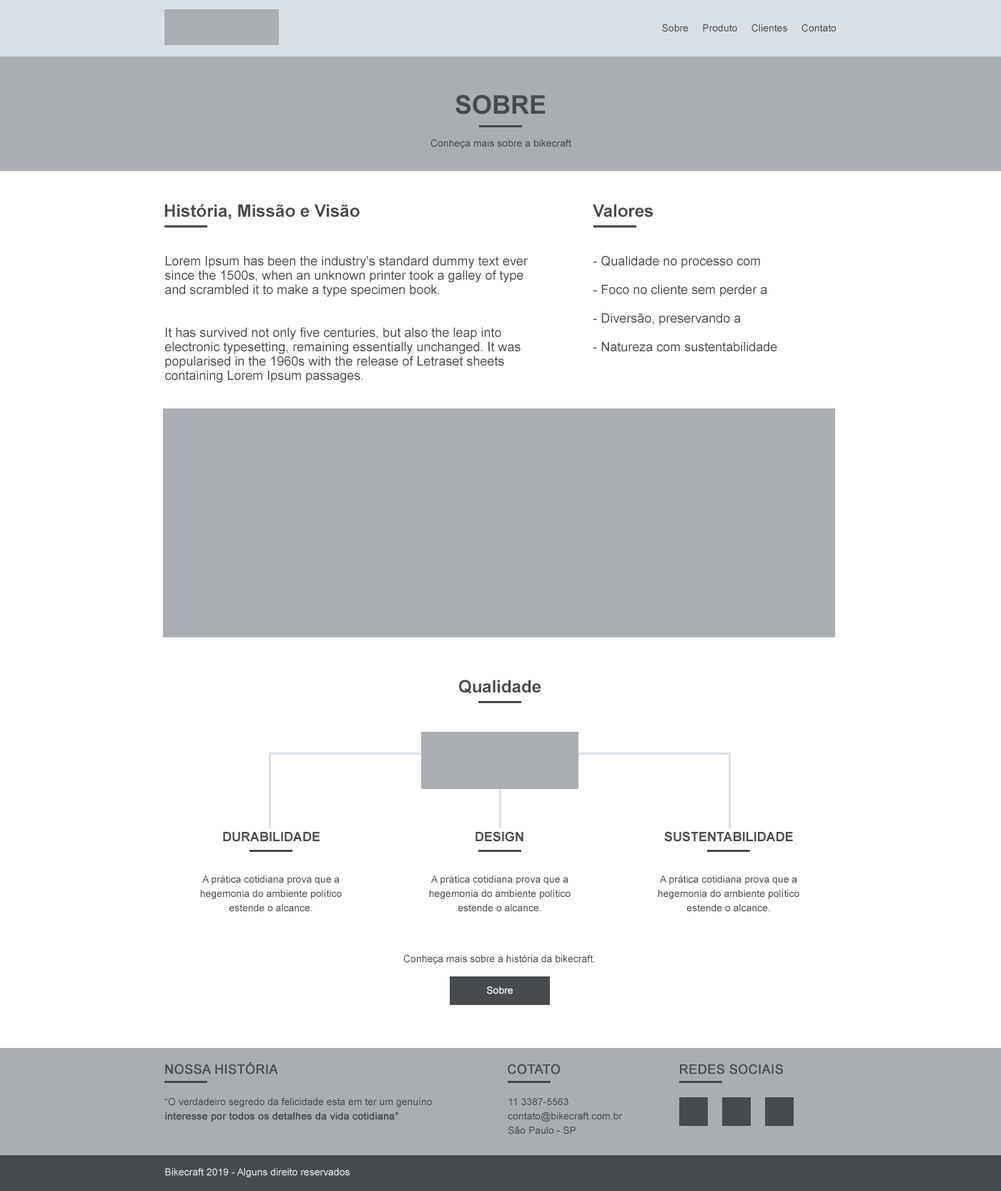
<style>
.page{position:relative;width:1001px;height:1191px;background:#ffffff}
.page>*{position:absolute;margin:0}
.t1{font:10px "ArialMT";color:#484b4d}
.t2{font:25.7px "Arial-BoldMT";color:#484b4d;text-transform:uppercase}
.t3{font:10px "ArialMT";color:#484b4d;text-transform:uppercase}
.t4{font:17.2px "Arial-BoldMT";color:#484b4d}
.t5{font:12.9px/14.3px "ArialMT";color:#484b4d}
.t6{font:12.9px "Arial-BoldMT";color:#484b4d;text-transform:uppercase}
.t7{font:10px/14.3px "ArialMT";color:#484b4d}
.t8{font:10.3px "ArialMT";color:#484b4d}
.t9{font:10px "ArialMT";color:#ffffff}
.t10{font:12.9px "ArialMT";color:#484b4d;text-transform:uppercase;font-weight:bold}
.t11{font:10px/14.3px "ArialMT";color:#484b4d;text-transform:uppercase}
.t12{font:10px/14.3px "ArialMT";color:#484b4d;font-weight:bold}
.t13{font:10px "ArialMT";color:#d9e0e6}
</style>
<div class="page">
<p class="t1" style="left:662px;top:24px;width:175px;height:8px">Sobre     Produto     Clientes     Contato</p>
<p class="t2" style="left:456px;top:94px;width:90px;height:20px">sobre</p>
<p class="t1" style="left:431px;top:139px;width:140px;height:10px"><span class="t3">c</span>onheça mais sobre a bikecraft</p>
<p class="t4" style="left:165px;top:204px;width:195px;height:16px">História, Missão e Visão</p>
<p class="t4" style="left:593px;top:204px;width:60px;height:13px">Valores</p>
<p class="t5" style="left:165px;top:256px;width:364px;height:127px">Lorem Ipsum has been the industry's standard dummy text ever since the 1500s, when an unknown printer took a galley of type and scrambled it to make a type specimen book. <br><br><br>It has survived not only five centuries, but also the leap into electronic typesetting, remaining essentially unchanged. It was popularised in the 1960s with the release of Letraset sheets containing Lorem Ipsum passages.</p>
<p class="t5" style="left:593px;top:255px;width:184px;height:97px">- Qualidade no processo com<br><br>- Foco no cliente sem perder a<br><br>- Diversão, preservando a<br><br>- Natureza com sustentabilidade</p>
<p class="t4" style="left:459px;top:679px;width:82px;height:15px">Qualidade</p>
<p class="t6" style="left:223px;top:832px;width:97px;height:10px">DURABILIDADE</p>
<p class="t6" style="left:476px;top:831px;width:48px;height:11px">Design</p>
<p class="t6" style="left:664px;top:831px;width:129px;height:11px">SUSTENTABILIDADE</p>
<p class="t7" style="left:200px;top:875px;width:142px;height:36px;text-align:center">A prática cotidiana prova que a hegemonia do ambiente político estende o alcance.</p>
<p class="t7" style="left:429px;top:875px;width:142px;height:36px;text-align:center">A prática cotidiana prova que a hegemonia do ambiente político estende o alcance.</p>
<p class="t7" style="left:658px;top:875px;width:142px;height:36px;text-align:center">A prática cotidiana prova que a hegemonia do ambiente político estende o alcance.</p>
<p class="t8" style="left:403px;top:954px;width:192px;height:10px">Conheça mais sobre a história da bikecraft.</p>
<p class="t9" style="left:487px;top:986px;width:26px;height:8px">Sobre</p>
<p class="t10" style="left:165px;top:1061px;width:113px;height:13px">Nossa história</p>
<p class="t10" style="left:508px;top:1064px;width:53px;height:10px">cotato</p>
<p class="t10" style="left:680px;top:1064px;width:103px;height:10px">redes sociais</p>
<p class="t7" style="left:165px;top:1097px;width:267px;height:24px"><span class="t11">“O </span>verdadeiro segredo da felicidade esta em ter um genuíno <span class="t12">interesse por todos os detalhes da vida cotidiana”</span></p>
<p class="t7" style="left:508px;top:1098px;width:115px;height:36px"><span class="t11">11 3387-5563<br></span>contato@bikecraft.com.br<br>São Paulo - SP</p>
<p class="t13" style="left:165px;top:1168px;width:185px;height:9px">Bikecraft 2019 - Alguns direito reservados</p>
</div>
